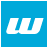
<style>
.page{position:relative;width:48px;height:48px;background:#00a9da}
.page>*{position:absolute;margin:0}
.t1{font:48px "Magneto-Bold";letter-spacing:-0.05em;color:#ffffff}
</style>
<div class="page">
<p class="t1" style="left:6px;top:18px;width:38px;height:16px">w</p>
</div>
